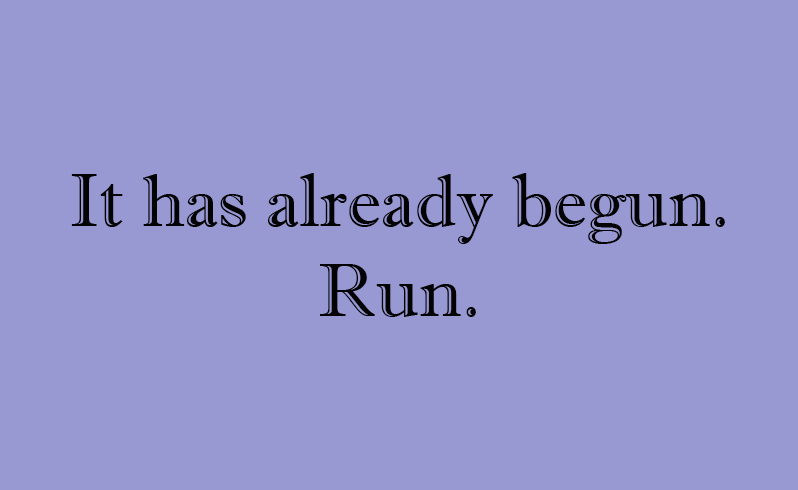
<style>
.page{position:relative;width:798px;height:490px;background:#9898d3}
.page>*{position:absolute;margin:0}
.t1{font:74.8px "ImprintMT-Shadow";color:#030303}
</style>
<div class="page">
<p class="t1" style="left:71px;top:173px;width:654px;height:144px;text-align:center">It has already begun.<br>Run.</p>
</div>
